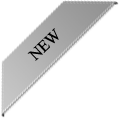
<style>
.page{position:relative;width:120px;height:121px;background:#ffffff}
.page>*{position:absolute;margin:0}
.t1{font:16px "TimesNewRomanPSMT";color:#000000}
</style>
<div class="page">
<p class="t1" style="left:27px;top:28px;width:32px;height:33px;rotate:-44deg">NEW</p>
</div>
